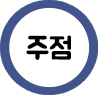
<style>
.page{position:relative;width:98px;height:95px;background:#ffffff}
.page>*{position:absolute;margin:0}
.t1{font:30px "BMJUA";color:#000000}
</style>
<div class="page">
<p class="t1" style="left:26px;top:35px;width:45px;height:25px">주점</p>
</div>
